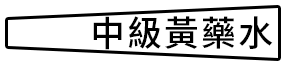
<style>
.page{position:relative;width:286px;height:66px;background:#ffffff}
.page>*{position:absolute;margin:0}
.t1{font:35px "NotoSansCJKtc-Medium";letter-spacing:0.06em;color:#000000}
</style>
<div class="page">
<p class="t1" style="left:93px;top:16px;width:180px;height:34px">中級黃藥水</p>
</div>
